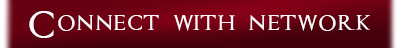
<style>
.page{position:relative;width:400px;height:48px}
.page>*{position:absolute;margin:0}
.t1{font:40px "Assassin$";color:#fbfbfb}
</style>
<div class="page">
<p class="t1" style="left:29px;top:11px;width:341px;height:27px">Connect with network</p>
</div>
